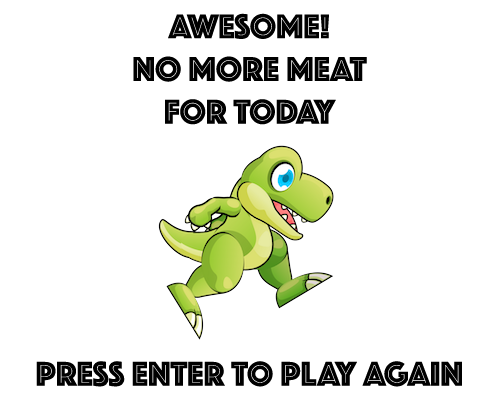
<style>
.page{position:relative;width:500px;height:400px;background:#ffffff}
.page>*{position:absolute;margin:0}
.t1{font:35.6px "Phosphate-Inline";color:#000000}
</style>
<div class="page">
<p class="t1" style="left:36px;top:13px;width:426px;height:374px;text-align:center">AWESOME!<br>NO MORE MEAT<br>FOR TODAY<br><br><br><br>PRESS ENTER TO PLAY AGAIN</p>
</div>
